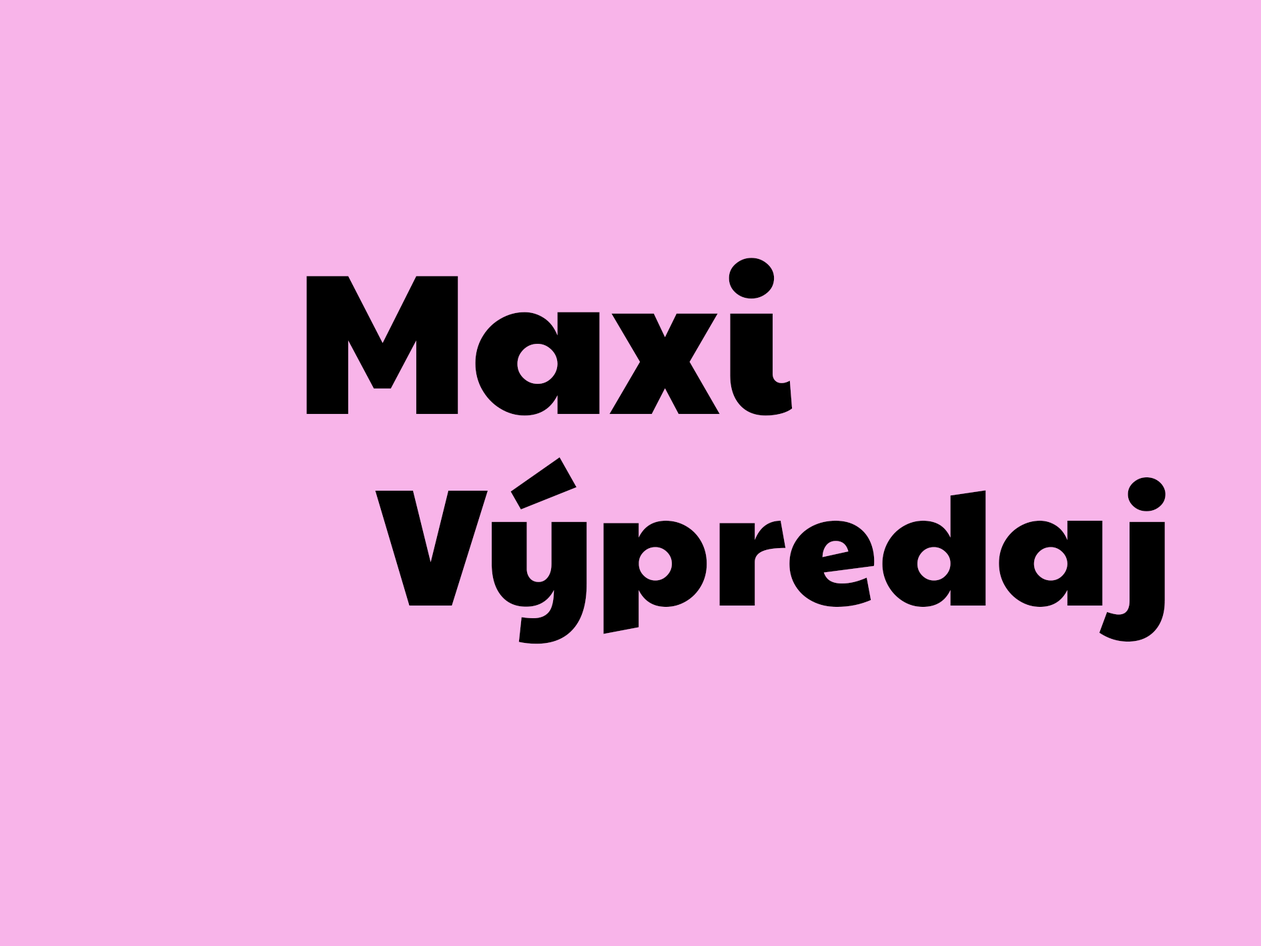
<style>
.page{position:relative;width:1261px;height:946px;background:#f8b4e9}
.page>*{position:absolute;margin:0}
.t1{font:200.2px "PaytoneOne-Regular";color:#000000}
.t2{font:166.8px "PaytoneOne-Regular";color:#000000}
</style>
<div class="page">
<p class="t1" style="left:306px;top:258px;width:487px;height:158px">Maxi</p>
<p class="t2" style="left:375px;top:457px;width:791px;height:187px">Výpredaj</p>
</div>
